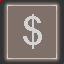
<style>
.page{position:relative;width:64px;height:64px;background:#7f7169}
.page>*{position:absolute;margin:0}
.t1{font:40px "ArialMT";color:#d3d3d3}
</style>
<div class="page">
<p class="t1" style="left:23px;top:14px;width:19px;height:35px">$</p>
</div>
